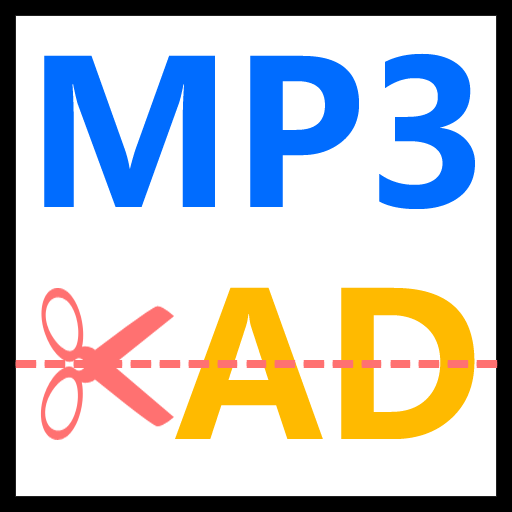
<style>
.page{position:relative;width:512px;height:512px;background:#ffffff}
.page>*{position:absolute;margin:0}
.t1{font:200px "MicrosoftYaHei-Bold";color:#006cff}
.t2{font:200px "MicrosoftYaHei-Bold";color:#ffba00}
.t3{font:36px "MicrosoftYaHei-Bold";letter-spacing:-0.025em;color:#ff7171}
</style>
<div class="page">
<p class="t1" style="left:44px;top:53px;width:431px;height:156px">MP3</p>
<p class="t2" style="left:175px;top:287px;width:300px;height:152px">AD</p>
<p class="t3" style="left:15px;top:364px;width:483px;height:4px">-- -- -- -- -- -- -- -- -- -- -- -- -- -- -- -- --</p>
<p class="t3" style="left:15px;top:362px;width:483px;height:4px">-- -- -- -- -- -- -- -- -- -- -- -- -- -- -- -- --</p>
<p class="t3" style="left:15px;top:360px;width:483px;height:4px">-- -- -- -- -- -- -- -- -- -- -- -- -- -- -- -- --</p>
</div>
